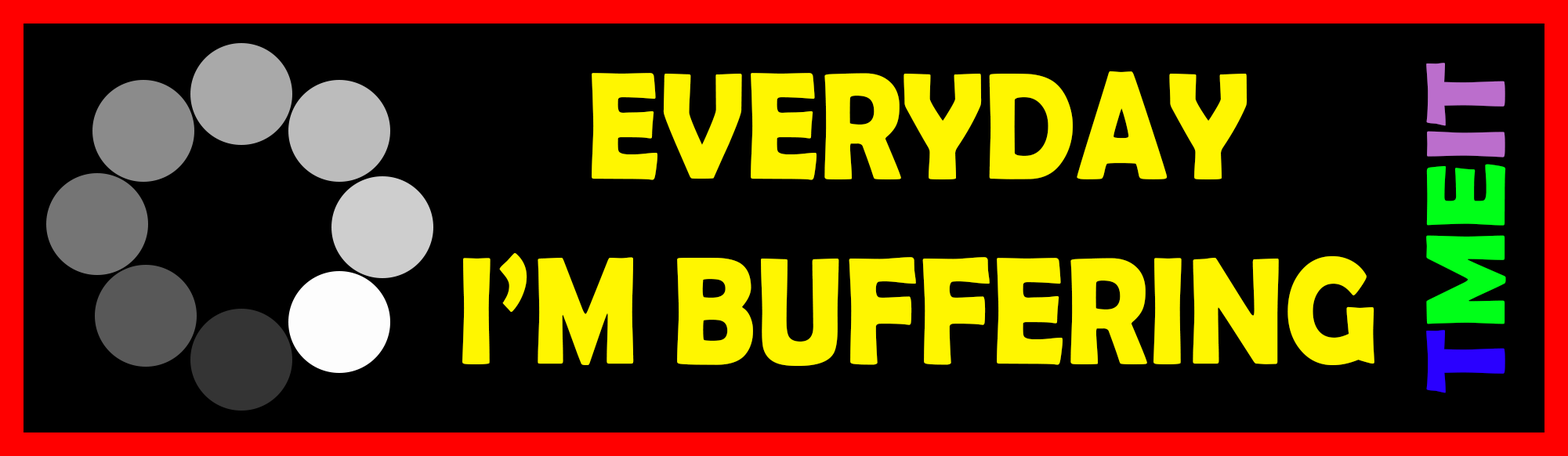
<style>
.page{position:relative;width:1568px;height:456px;background:#000000}
.page>*{position:absolute;margin:0}
.t1{font:113.3px "BerlinSansFBDemi-Bold";color:#00ff18;scale:1.07 1}
.t2{font:113.3px "BerlinSansFBDemi-Bold";color:#2a00ff;scale:1.07 1}
.t3{font:113.3px "BerlinSansFBDemi-Bold";color:#bb6ecc;scale:1.07 1}
.t4{font:153.9px "BerlinSansFBDemi-Bold";color:#fff600;scale:0.85 1}
</style>
<div class="page">
<p class="t1" style="left:1426px;top:63px;width:80px;height:330px;rotate:-90deg"><span class="t2">T</span>ME<span class="t3">IT</span></p>
<p class="t4" style="left:462px;top:71px;width:912px;height:295px;text-align:center">EVERYDAY<br>I’M BUFFERING</p>
</div>
